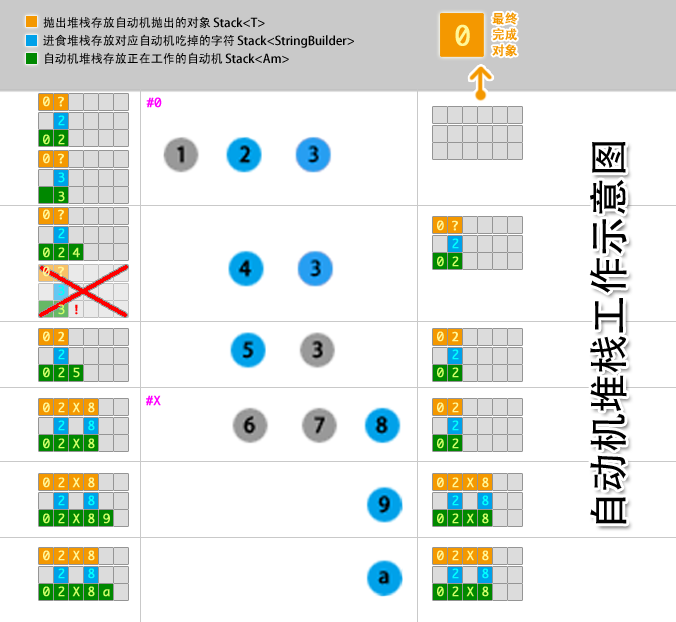
<style>
.page{position:relative;width:676px;height:622px;background:#ffffff}
.page>*{position:absolute;margin:0}
.t1{font:12px/18px "AdobeHeitiStd-Regular";color:#000000}
.t2{font:12.5px/16.1px "AdobeHeitiStd-Regular";color:#f49800;font-weight:bold}
.t3{font:25.8px "Monaco";color:#fff799;font-weight:bold}
.t4{font:12px/19px "Monaco";color:#d2ff69;font-weight:bold}
.t5{font:12px/19px "Monaco";color:#fff799;font-weight:bold}
.t6{font:12px/19px "AdobeHeitiStd-Regular";color:#fff799;font-weight:bold}
.t7{font:12px/19px "Monaco";color:#00ffff;font-weight:bold}
.t8{font:39.3px "AdobeHeitiStd-Regular";color:#000000}
.t9{font:12px/18px "Monaco";color:#d2ff69;font-weight:bold}
.t10{font:12px/18px "Monaco";color:#fff799;font-weight:bold}
.t11{font:12px/18px "AdobeHeitiStd-Regular";color:#fff799;font-weight:bold}
.t12{font:12px/18px "Monaco";color:#00ffff;font-weight:bold}
</style>
<div class="page">
<p class="t1" style="left:43px;top:16px;width:311px;height:49px">抛出堆栈存放自动机抛出的对象 Stack&lt;T&gt;<br>进食堆栈存放对应自动机吃掉的字符 Stack&lt;StringBuilder&gt;<br>自动机堆栈存放正在工作的自动机 Stack&lt;Am&gt;</p>
<p class="t2" style="left:492px;top:12px;width:26px;height:45px">最终<br>完成<br>对象</p>
<p class="t3" style="left:455px;top:24px;width:15px;height:22px">0</p>
<p class="t4" style="left:43px;top:96px;width:22px;height:106px"><span class="t5">0 </span><span class="t6">？<br>  </span><span class="t7">2<br></span>0 2<br><span class="t5">0 </span><span class="t6">？<br>  </span><span class="t7">3<br>  </span>3</p>
<p class="t8" style="left:589px;top:142px;width:38px;height:382px;rotate:-90deg">自动机堆栈工作示意图</p>
<p class="t9" style="left:437px;top:220px;width:22px;height:47px"><span class="t10">0 </span><span class="t11">？<br>  </span><span class="t12">2<br></span>0 2</p>
<p class="t9" style="left:43px;top:331px;width:37px;height:47px"><span class="t10">0 </span><span class="t11">2<br>  </span><span class="t12">2<br></span>0 2 5</p>
<p class="t9" style="left:437px;top:331px;width:22px;height:47px"><span class="t10">0 </span><span class="t11">2<br>  </span><span class="t12">2<br></span>0 2</p>
<p class="t10" style="left:43px;top:402px;width:52px;height:47px">0 2 X 8<br>  <span class="t12">2   8<br></span><span class="t9">0 2 X 8</span></p>
<p class="t10" style="left:437px;top:402px;width:22px;height:47px">0 2 <br>  <span class="t12">2<br></span><span class="t9">0 2</span></p>
<p class="t9" style="left:43px;top:477px;width:67px;height:47px"><span class="t10">0 2 X 8<br>  </span><span class="t12">2   8<br></span>0 2 X 8 9</p>
<p class="t10" style="left:437px;top:477px;width:52px;height:47px">0 2 X 8<br>  <span class="t12">2   8<br></span><span class="t9">0 2 X 8</span></p>
<p class="t9" style="left:43px;top:550px;width:67px;height:47px"><span class="t10">0 2 X 8<br>  </span><span class="t12">2   8<br></span>0 2 X 8 a</p>
<p class="t10" style="left:437px;top:550px;width:52px;height:47px">0 2 X 8<br>  <span class="t12">2   8<br></span><span class="t9">0 2 X 8</span></p>
</div>
